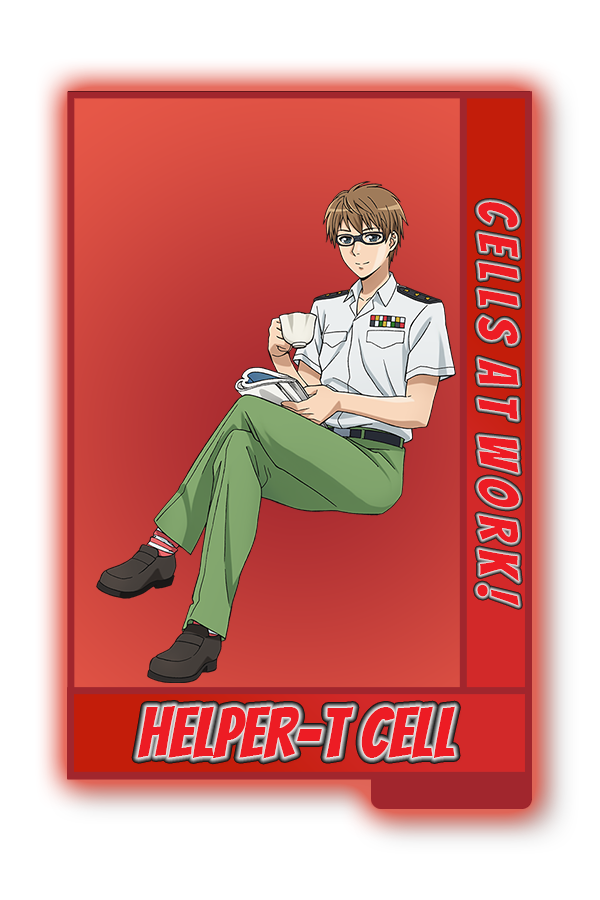
<style>
.page{position:relative;width:600px;height:900px;background:#ffffff}
.page>*{position:absolute;margin:0}
.t1{font:54px "Bangers-Regular";color:#ed1c24}
.t2{font:70px "Bangers-Regular";color:#ed1c24}
</style>
<div class="page">
<p class="t1" style="left:477px;top:202px;width:42px;height:404px;rotate:90deg">C e l l S  A t  W o r k !</p>
<p class="t2" style="left:137px;top:706px;width:318px;height:53px">Helper-t cell</p>
</div>
